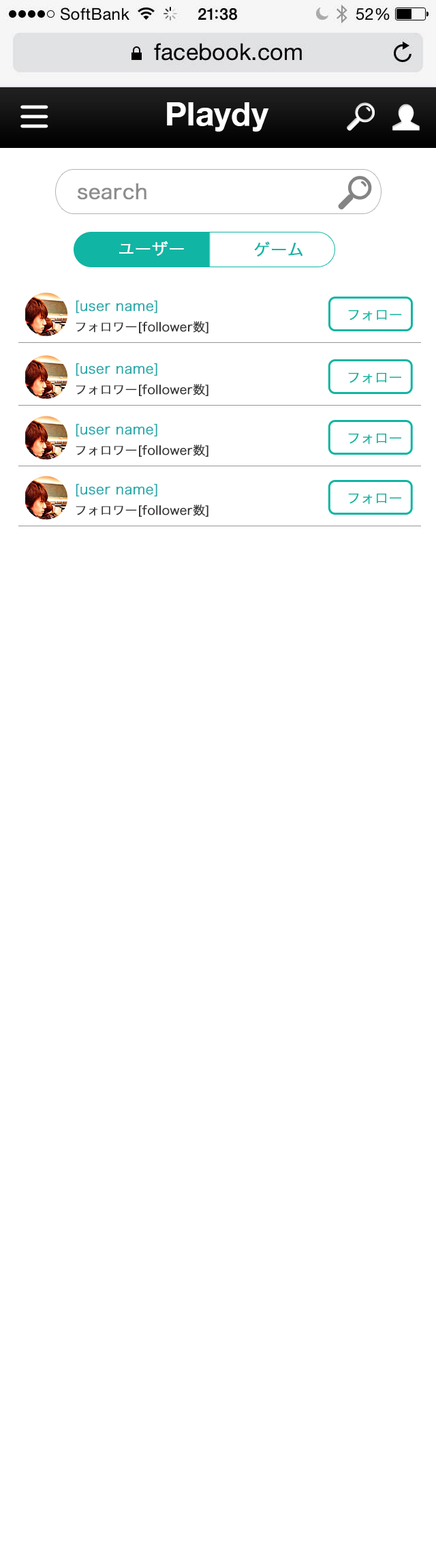
<style>
.page{position:relative;width:436px;height:1568px;background:#ffffff}
.page>*{position:absolute;margin:0}
.t1{font:32.7px "HelveticaNeue-Bold";color:#ffffff}
.t2{font:20.5px "HiraKakuPro-W3";color:#8d8d8d;font-weight:bold}
.t3{font:16.4px "HiraKakuPro-W3";color:#ffffff;font-weight:bold}
.t4{font:16.4px "HiraKakuPro-W3";color:#10b5a3;font-weight:bold}
.t5{font:12.3px/20.5px "HiraKakuPro-W3";color:#353535;font-weight:bold}
.t6{font:13.6px/20.5px "HiraKakuPro-W3";color:#2dabac;font-weight:bold}
.t7{font:13.6px "HiraKakuPro-W3";color:#10b5a3;font-weight:bold}
</style>
<div class="page">
<p class="t1" style="left:167px;top:102px;width:102px;height:30px">Playdy</p>
<p class="t2" style="left:77px;top:183px;width:70px;height:17px">search</p>
<p class="t3" style="left:119px;top:241px;width:65px;height:15px">ユーザー</p>
<p class="t4" style="left:254px;top:241px;width:49px;height:16px">ゲーム</p>
<p class="t5" style="left:76px;top:300px;width:133px;height:33px"><span class="t6">[user name]<br></span>フォロワー[follower数]</p>
<p class="t7" style="left:348px;top:310px;width:54px;height:11px">フォロー</p>
<p class="t5" style="left:76px;top:363px;width:133px;height:33px"><span class="t6">[user name]<br></span>フォロワー[follower数]</p>
<p class="t7" style="left:348px;top:372px;width:54px;height:12px">フォロー</p>
<p class="t5" style="left:76px;top:423px;width:133px;height:34px"><span class="t6">[user name]<br></span>フォロワー[follower数]</p>
<p class="t7" style="left:348px;top:433px;width:54px;height:11px">フォロー</p>
<p class="t5" style="left:76px;top:483px;width:133px;height:34px"><span class="t6">[user name]<br></span>フォロワー[follower数]</p>
<p class="t7" style="left:348px;top:493px;width:54px;height:11px">フォロー</p>
</div>
